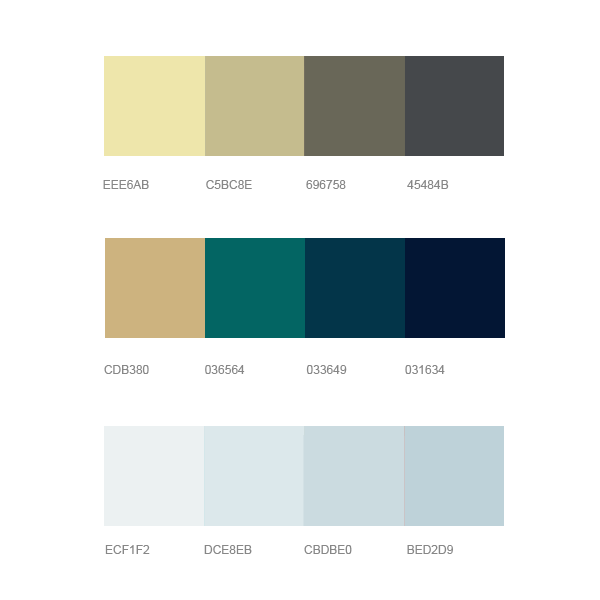
<style>
.page{position:relative;width:600px;height:600px;background:#ffffff}
.page>*{position:absolute;margin:0}
.t1{font:12px "ArialMT";color:#878787;text-transform:uppercase}
</style>
<div class="page">
<p class="t1" style="left:103px;top:180px;width:46px;height:9px">EEE6AB</p>
<p class="t1" style="left:306px;top:180px;width:40px;height:9px">696758</p>
<p class="t1" style="left:407px;top:180px;width:42px;height:9px">45484B</p>
<p class="t1" style="left:104px;top:365px;width:45px;height:9px">CDB380</p>
<p class="t1" style="left:205px;top:365px;width:40px;height:9px">036564</p>
<p class="t1" style="left:306px;top:365px;width:41px;height:9px">033649</p>
<p class="t1" style="left:105px;top:545px;width:45px;height:9px">ECF1F2</p>
<p class="t1" style="left:204px;top:545px;width:48px;height:9px">DCE8EB</p>
<p class="t1" style="left:304px;top:545px;width:48px;height:9px">CBDBE0</p>
<p class="t1" style="left:407px;top:545px;width:46px;height:9px">BED2D9</p>
</div>
